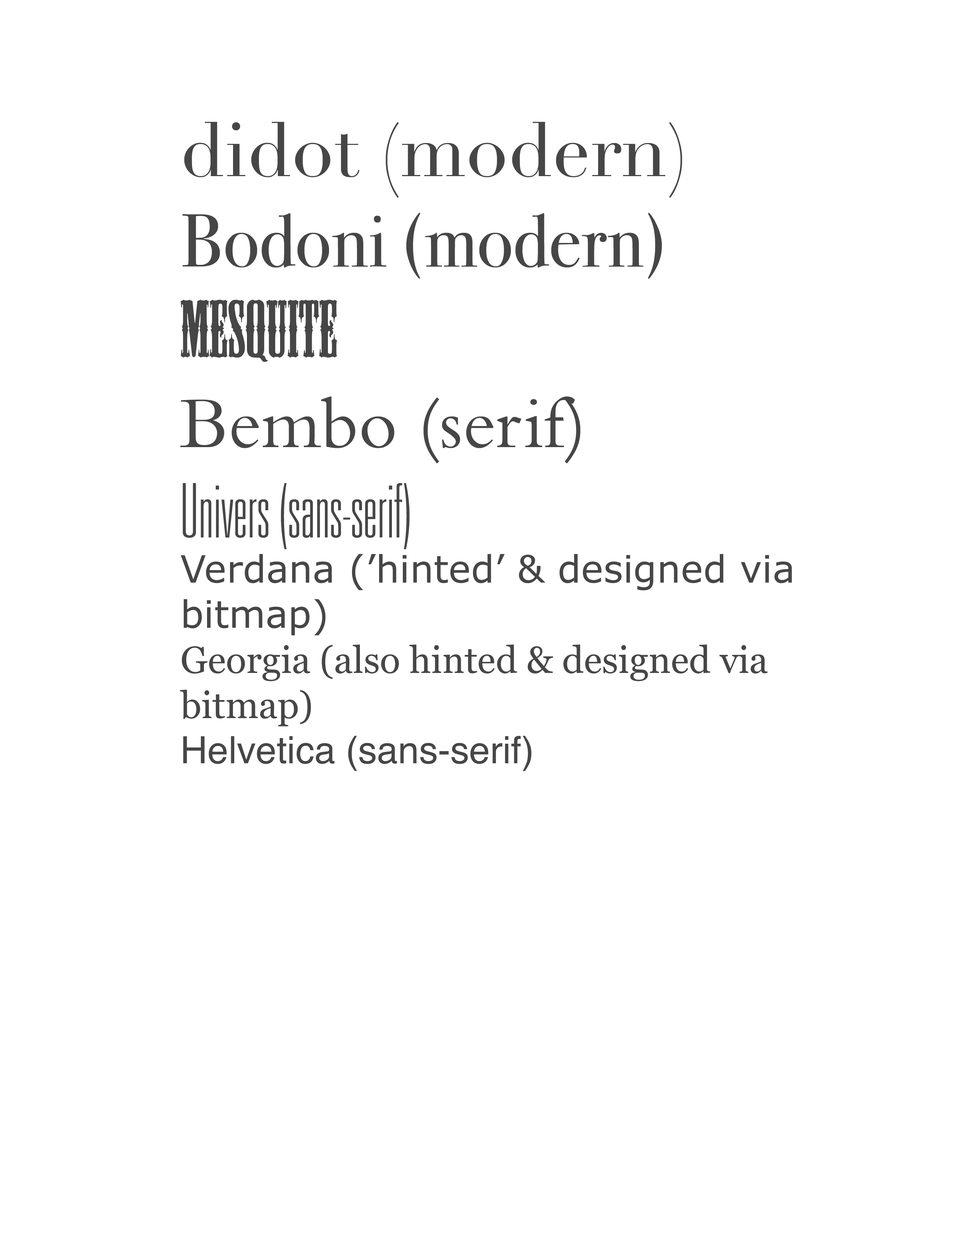
<style>
.page{position:relative;width:960px;height:1242px;background:#ffffff}
.page>*{position:absolute;margin:0}
.t1{font:37.6px "Georgia";color:#474646}
.t2{font:75.3px "Didot";color:#474646}
.t3{font:75.3px "BodoniSvtyTwoITCTTBook";color:#474646}
.t4{font:75.3px "MesquiteStd";color:#474646}
.t5{font:75.3px "BemboStd";color:#474646}
.t6{font:75.3px "UniversLTStd-ThinUltraCn";color:#474646}
.t7{font:37.6px "Verdana";color:#474646}
.t8{font:37.6px "Helvetica";color:#474646}
</style>
<div class="page">
<p class="t1" style="left:180px;top:122px;width:612px;height:649px"><span class="t2">didot (modern)<br></span><span class="t3">Bodoni (modern)<br></span><span class="t4">MESQUITE<br></span><span class="t5">Bembo (serif)<br></span><span class="t6">Univers (sans-serif)<br></span><span class="t7">Verdana (’hinted’ &amp; designed via bitmap) <br></span>Georgia (also hinted &amp; designed via bitmap)<br><span class="t8">Helvetica (sans-serif)</span></p>
</div>
